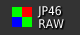
<style>
.page{position:relative;width:80px;height:35px;background:#333333}
.page>*{position:absolute;margin:0}
.t1{font:12px/13.1px "DejaVuSansCondensed";color:#ffffff}
</style>
<div class="page">
<p class="t1" style="left:37px;top:6px;width:27px;height:22px">JP46 <br>RAW</p>
</div>
